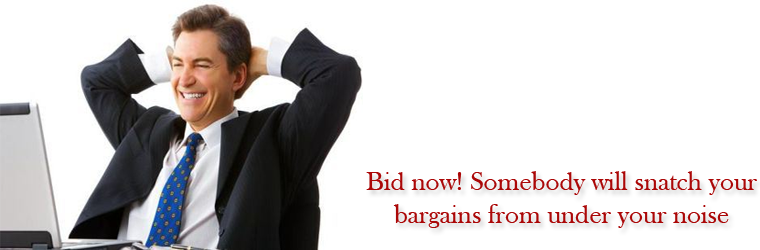
<style>
.page{position:relative;width:760px;height:250px;background:#ffffff}
.page>*{position:absolute;margin:0}
.t1{font:27px "BaskOldFace";color:#ab0707}
</style>
<div class="page">
<p class="t1" style="left:366px;top:171px;width:391px;height:57px;text-align:center">Bid now! Somebody will snatch your bargains from under your noise</p>
</div>
